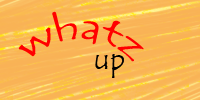
<style>
.page{position:relative;width:200px;height:100px}
.page>*{position:absolute;margin:0}
.t1{font:36px "TempusSansITC";color:#ff0000}
.t2{font:30px "TempusSansITC";color:#000000}
</style>
<div class="page">
<p class="t1" style="left:18px;top:11px;width:126px;height:51px">whatz</p>
<p class="t2" style="left:95px;top:54px;width:29px;height:24px">up</p>
</div>
